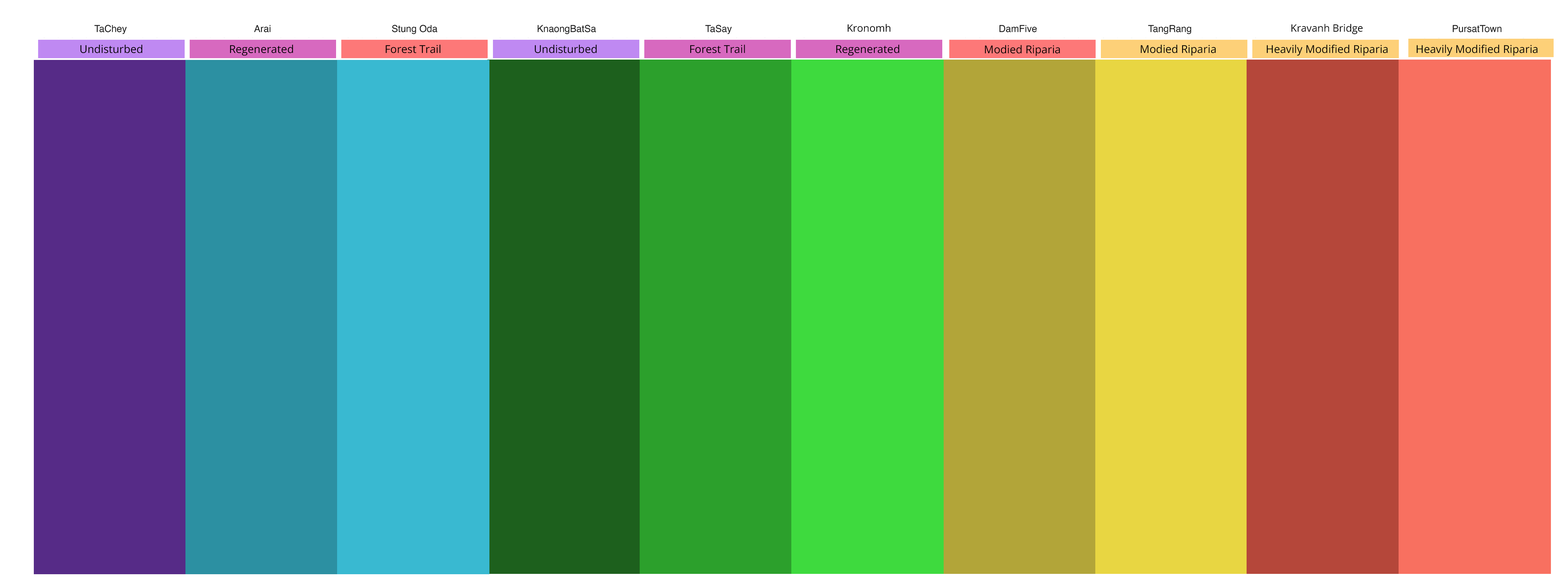
<style>
.page{position:relative;width:1568px;height:577px}
.page>*{position:absolute;margin:0}
.t1{font:10.2px "OpenSans-Regular";color:#000000}
.t2{font:10.9px "OpenSans-Regular";color:#000000}
</style>
<div class="page">
<p class="t1" style="left:847px;top:24px;width:43px;height:8px">Kronomh</p>
<p class="t1" style="left:1291px;top:24px;width:72px;height:10px">Kravanh Bridge</p>
<p class="t2" style="left:80px;top:45px;width:62px;height:8px">Undisturbed</p>
<p class="t2" style="left:230px;top:45px;width:63px;height:11px">Regenerated</p>
<p class="t2" style="left:386px;top:45px;width:55px;height:8px">Forest Trail</p>
<p class="t2" style="left:535px;top:45px;width:62px;height:8px">Undisturbed</p>
<p class="t2" style="left:690px;top:45px;width:55px;height:8px">Forest Trail</p>
<p class="t2" style="left:836px;top:45px;width:63px;height:11px">Regenerated</p>
<p class="t2" style="left:985px;top:45px;width:75px;height:11px">Modied Riparia</p>
<p class="t2" style="left:1141px;top:45px;width:75px;height:11px">Modied Riparia</p>
<p class="t2" style="left:1267px;top:45px;width:121px;height:11px">Heavily Modified Riparia</p>
<p class="t2" style="left:1417px;top:45px;width:121px;height:11px">Heavily Modified Riparia</p>
</div>
